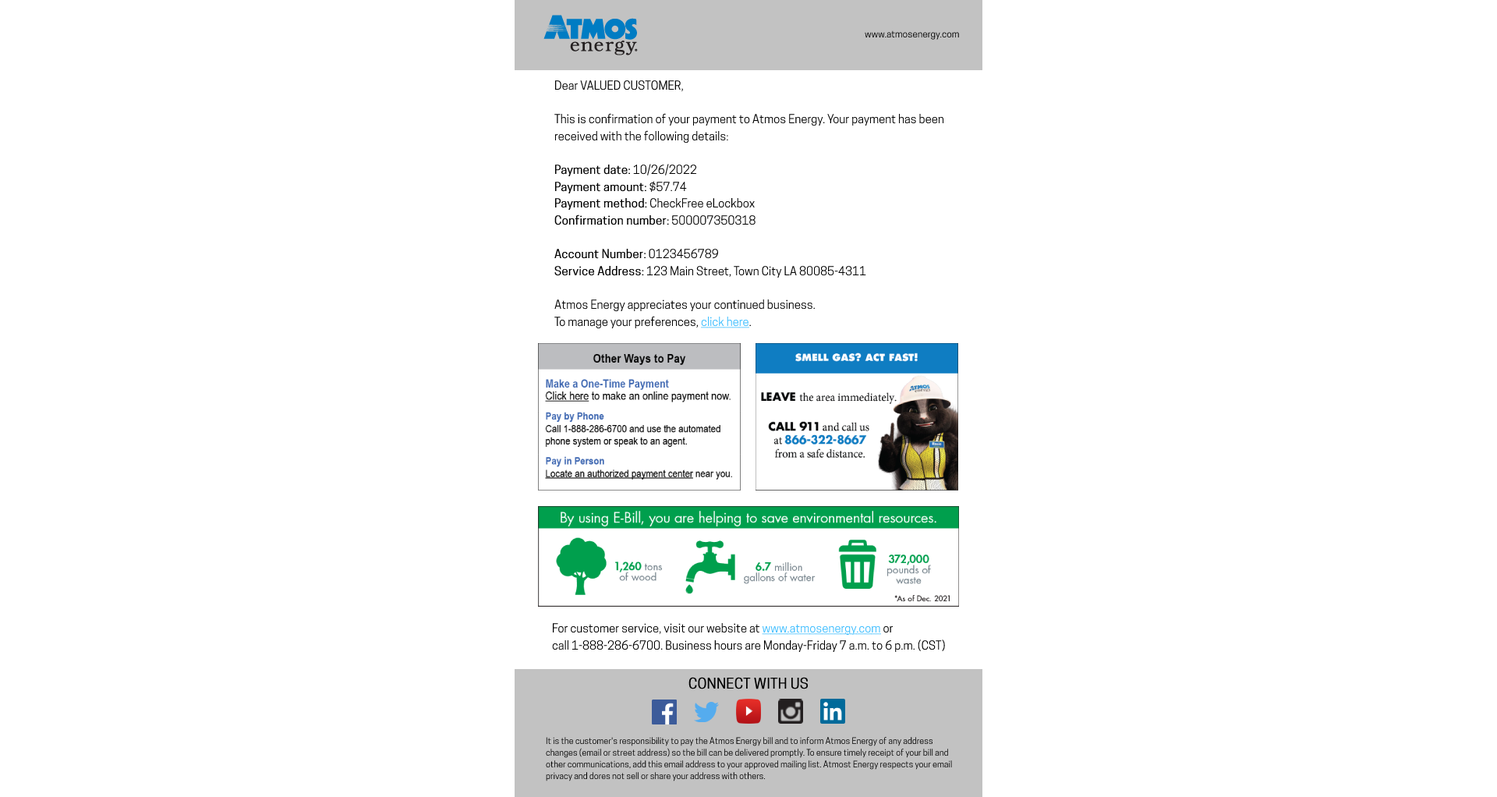
<style>
.page{position:relative;width:1497px;height:797px;background:#ffffff}
.page>*{position:absolute;margin:0}
.t1{font:9.4px "CooperHewitt-Book";color:#000000}
.t2{font:11.7px/16.8px "CooperHewitt-Book";color:#000000}
.t3{font:11.7px/16.8px "CooperHewitt-Book";color:#000000;font-weight:bold}
.t4{font:11.7px/16.8px "CooperHewitt-Book";color:#39bcff;text-decoration:underline}
.t5{font:14px "CooperHewitt-Book";color:#000000;font-weight:bold}
.t6{font:8.6px/11.7px "CooperHewitt-Book";color:#000000}
</style>
<div class="page">
<p class="t1" style="left:865px;top:30px;width:94px;height:10px">www.atmosenergy.com</p>
<p class="t2" style="left:554px;top:80px;width:389px;height:249px">Dear VALUED CUSTOMER,<br><br>This is confirmation of your payment to Atmos Energy. Your payment has been<br>received with the following details:<br><br><span class="t3">Payment date:</span> 10/26/2022 <br><span class="t3">Payment amount:</span> $57.74 <br><span class="t3">Payment method:</span> CheckFree eLockbox <br><span class="t3">Confirmation number:</span> 500007350318 <br><br><span class="t3">Account Number: </span>0123456789 <br><span class="t3">Service Address: </span>123 Main Street, Town City LA 80085-4311 <br><br>Atmos Energy appreciates your continued business. <br>To manage your preferences, <span class="t4">click here</span>.</p>
<p class="t2" style="left:552px;top:623px;width:393px;height:29px">For customer service, visit our website at <span class="t4">www.atmosenergy.com </span>or <br>call 1-888-286-6700. Business hours are Monday-Friday 7 a.m. to 6 p.m. (CST)</p>
<p class="t5" style="left:688px;top:677px;width:120px;height:12px">CONNECT WITH US</p>
<p class="t6" style="left:546px;top:737px;width:406px;height:44px">It is the customer's responsibility to pay the Atmos Energy bill and to inform Atmos Energy of any address<br>changes (email or street address) so the bill can be delivered promptly. To ensure timely receipt of your bill and other communications, add this email address to your approved mailing list. Atmost Energy respects your email privacy and dores not sell or share your address with others.</p>
</div>
